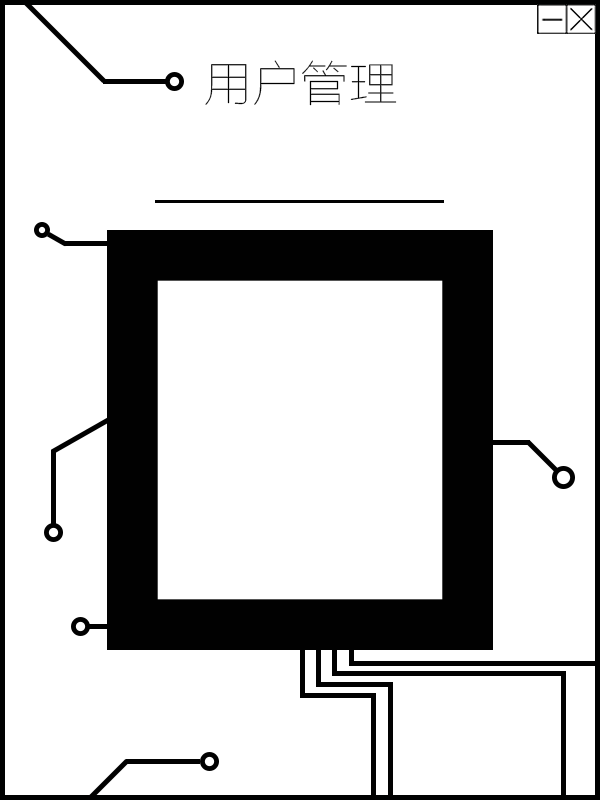
<style>
.page{position:relative;width:600px;height:800px;background:#ffffff}
.page>*{position:absolute;margin:0}
.t1{font:48.7px "FZLTCXHJW--GB1-0";color:#000000}
</style>
<div class="page">
<p class="t1" style="left:205px;top:60px;width:192px;height:46px">用户管理</p>
</div>
